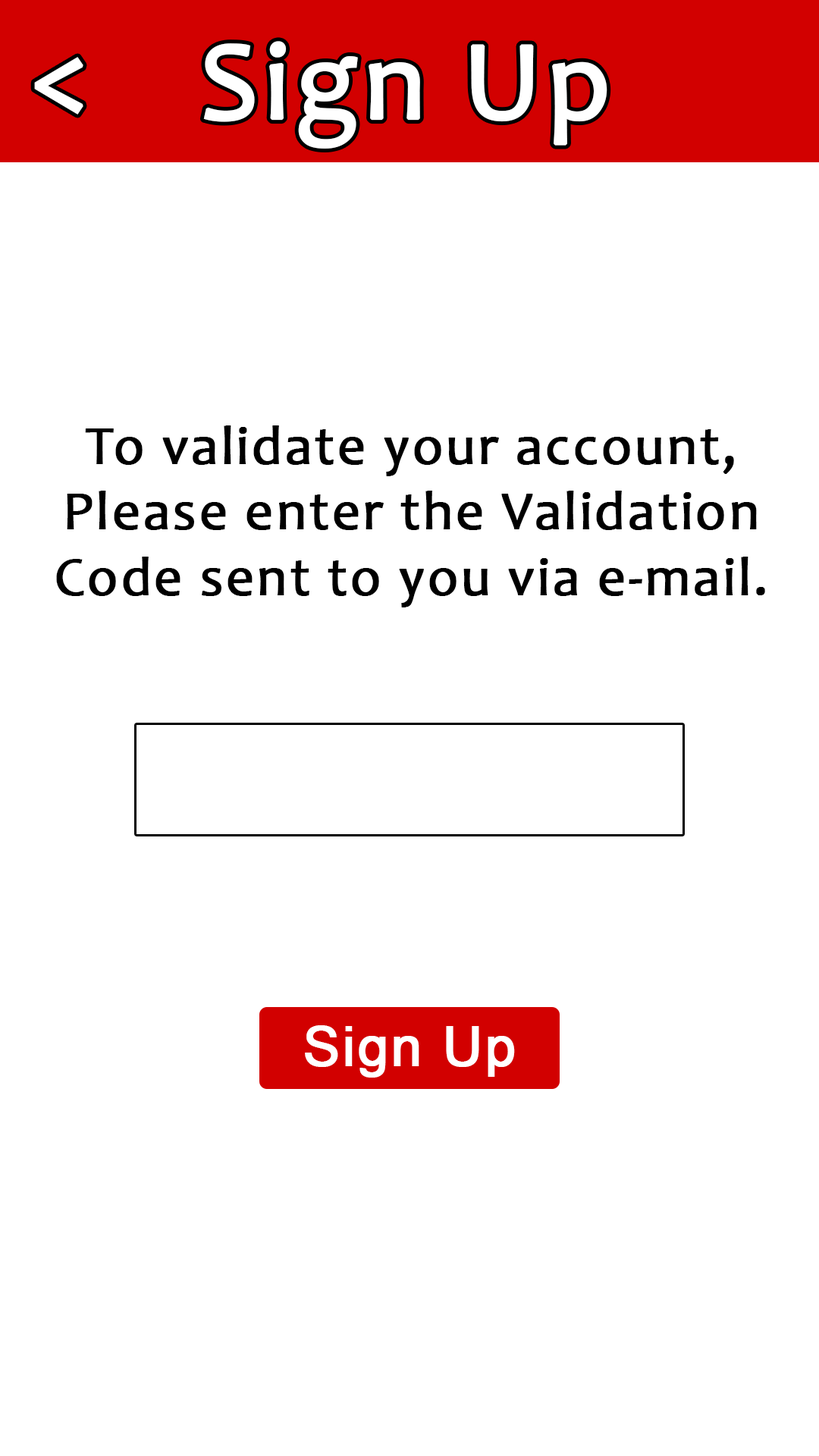
<style>
.page{position:relative;width:819px;height:1456px;background:#ffffff}
.page>*{position:absolute;margin:0}
.t1{font:113.4px "Candara";letter-spacing:0.03em;color:#ffffff;font-weight:bold}
.t2{font:113.7px "Candara";letter-spacing:0.03em;color:#ffffff;font-weight:bold}
.t3{font:54.6px "Candara";letter-spacing:0.03em;color:#000000;font-weight:bold}
.t4{font:54.6px "ArialMT";letter-spacing:0.03em;color:#ffffff;font-weight:bold}
</style>
<div class="page">
<p class="t1" style="left:203px;top:41px;width:404px;height:108px">Sign Up</p>
<p class="t2" style="left:34px;top:57px;width:49px;height:58px">&lt;</p>
<p class="t3" style="left:56px;top:425px;width:709px;height:182px;text-align:center">To validate your account,<br>Please enter the Validation<br>Code sent to you via e-mail.</p>
<p class="t4" style="left:305px;top:1025px;width:210px;height:53px">Sign Up</p>
</div>
